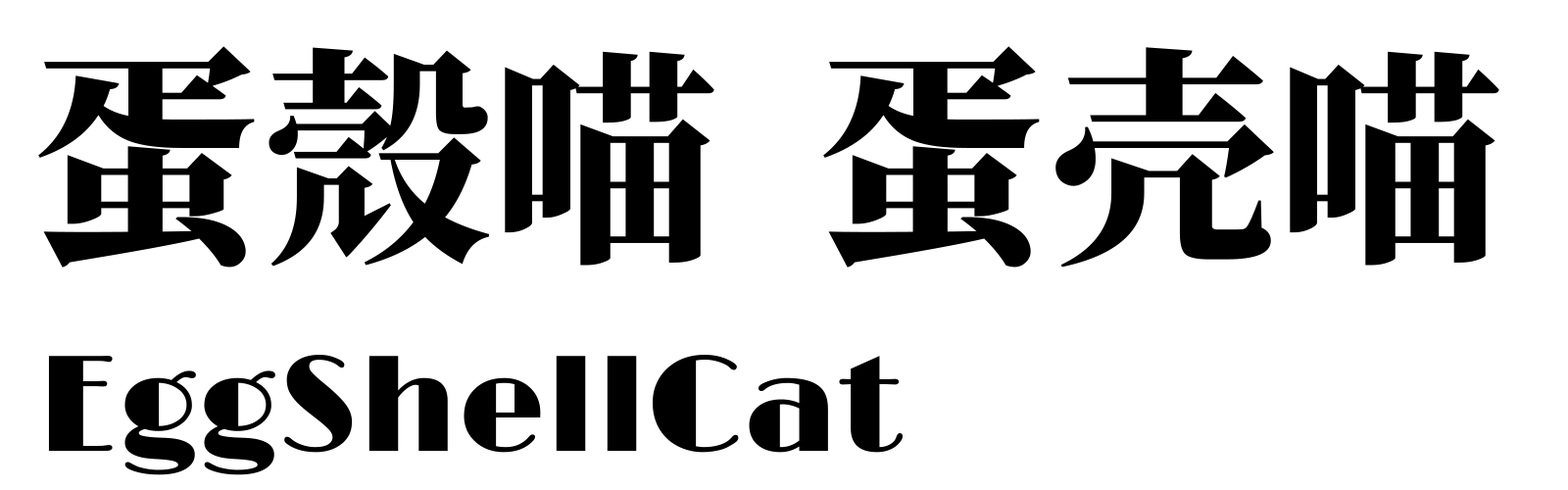
<style>
.page{position:relative;width:1568px;height:490px;background:#ffffff}
.page>*{position:absolute;margin:0}
.t1{font:230.6px "SourceHanSerifSC-Heavy";color:#000000}
.t2{font:137.2px "Limelight-Regular";color:#000000}
</style>
<div class="page">
<p class="t1" style="left:38px;top:46px;width:676px;height:222px">蛋殼喵</p>
<p class="t1" style="left:823px;top:46px;width:676px;height:222px">蛋壳喵</p>
<p class="t2" style="left:48px;top:355px;width:856px;height:120px">EggShellCat</p>
</div>
